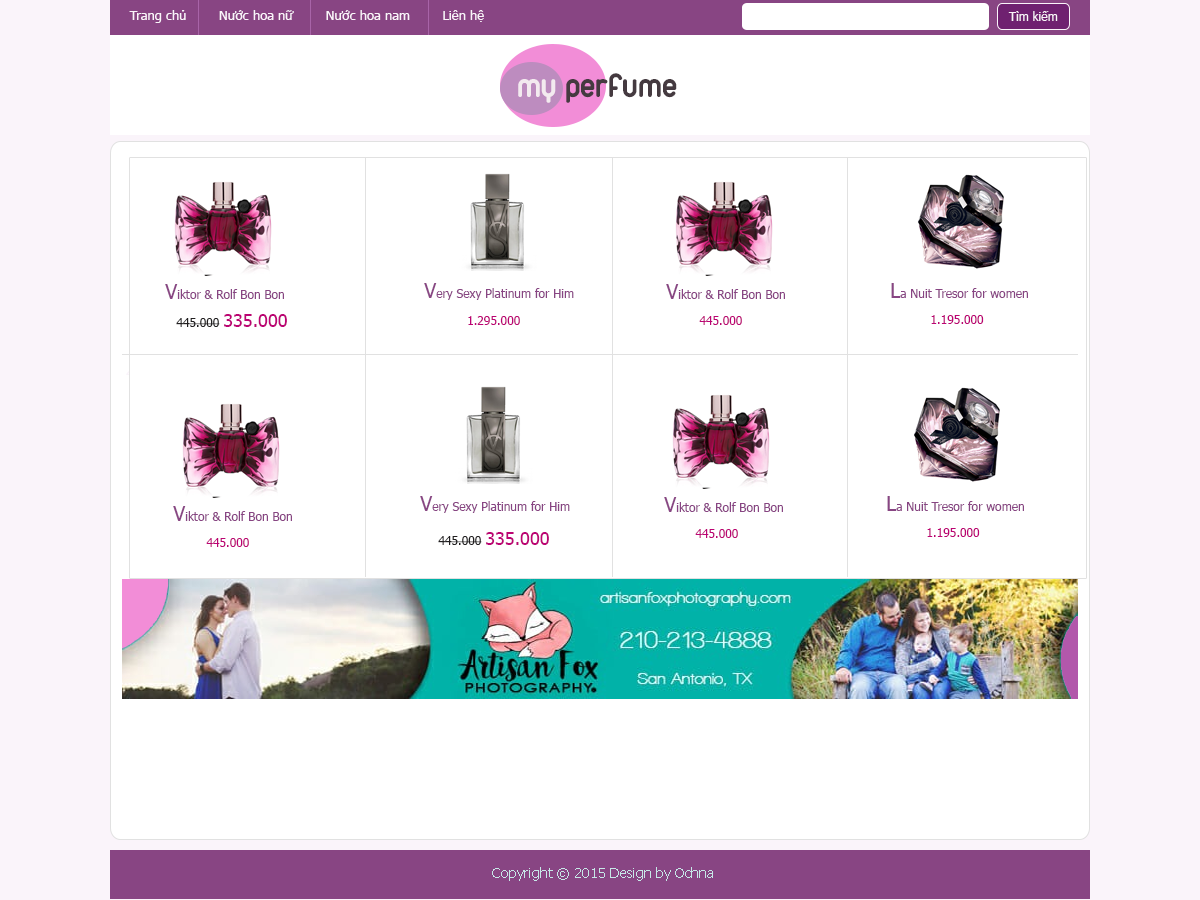
<style>
.page{position:relative;width:1200px;height:900px;background:#ffffff}
.page>*{position:absolute;margin:0}
.t1{font:13px "Tahoma";color:#faf4fa}
.t2{font:12px "Tahoma";color:#faf4fa}
.t3{font:36px "UTMDuepuntozeroBold";color:#453a40}
.t4{font:36px "UTMDuepuntozeroBold";color:#f3eaef}
.t5{font:12px "Tahoma";color:#884583}
.t6{font:20px "Tahoma";color:#884583}
.t7{font:12px "Tahoma";color:#211f20}
.t8{font:18px "Tahoma";color:#bc0374}
.t9{font:12px "Tahoma";color:#bc0374}
.t10{font:14px "Tahoma";color:#c7e8e8}
</style>
<div class="page">
<p class="t1" style="left:129px;top:10px;width:355px;height:13px">Trang chủ        Nước hoa nữ        Nước hoa nam        Liên hệ</p>
<p class="t2" style="left:1008px;top:11px;width:50px;height:10px">Tìm kiếm</p>
<p class="t3" style="left:518px;top:73px;width:159px;height:30px"><span class="t4">my</span> perfume</p>
<p class="t5" style="left:165px;top:284px;width:119px;height:15px"><span class="t6">V</span>iktor &amp; Rolf Bon Bon</p>
<p class="t5" style="left:424px;top:283px;width:150px;height:17px"><span class="t6">V</span>ery Sexy Platinum for Him</p>
<p class="t5" style="left:666px;top:284px;width:119px;height:15px"><span class="t6">V</span>iktor &amp; Rolf Bon Bon</p>
<p class="t5" style="left:891px;top:283px;width:137px;height:15px"><span class="t6">L</span>a Nuit Tresor for women</p>
<p class="t7" style="left:176px;top:314px;width:111px;height:13px">445.000 <span class="t8">335.000</span></p>
<p class="t9" style="left:468px;top:316px;width:52px;height:9px">1.295.000</p>
<p class="t9" style="left:699px;top:316px;width:43px;height:9px">445.000</p>
<p class="t9" style="left:931px;top:315px;width:53px;height:9px">1.195.000</p>
<p class="t5" style="left:420px;top:496px;width:150px;height:17px"><span class="t6">V</span>ery Sexy Platinum for Him</p>
<p class="t5" style="left:664px;top:497px;width:119px;height:15px"><span class="t6">V</span>iktor &amp; Rolf Bon Bon</p>
<p class="t5" style="left:887px;top:496px;width:137px;height:15px"><span class="t6">L</span>a Nuit Tresor for women</p>
<p class="t5" style="left:173px;top:506px;width:119px;height:15px"><span class="t6">V</span>iktor &amp; Rolf Bon Bon</p>
<p class="t7" style="left:438px;top:532px;width:111px;height:13px">445.000 <span class="t8">335.000</span></p>
<p class="t9" style="left:695px;top:529px;width:43px;height:9px">445.000</p>
<p class="t9" style="left:927px;top:528px;width:53px;height:9px">1.195.000</p>
<p class="t9" style="left:206px;top:538px;width:43px;height:9px">445.000</p>
<p class="t10" style="left:492px;top:867px;width:221px;height:14px">Copyright © 2015 Design by Ochna</p>
</div>
